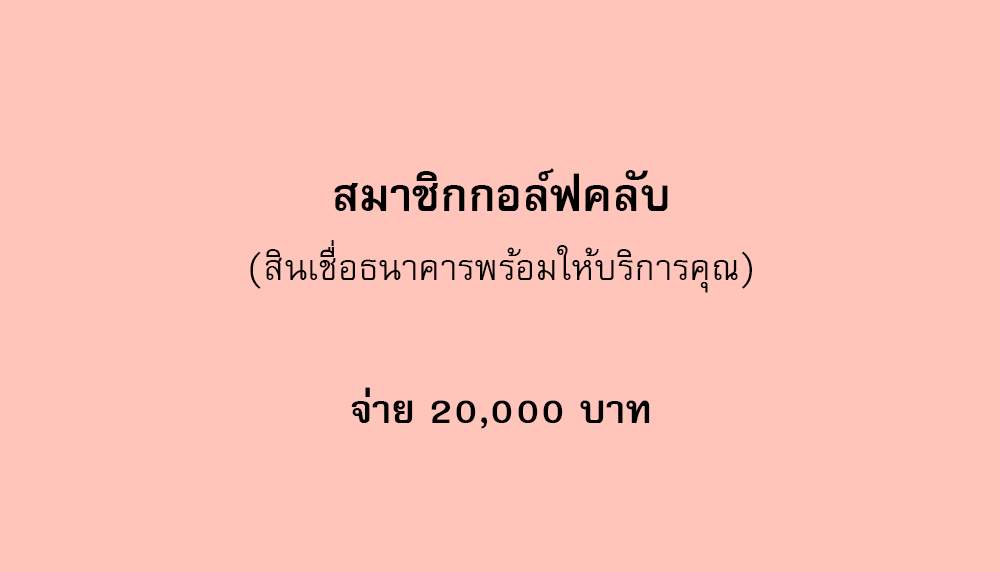
<style>
.page{position:relative;width:1000px;height:572px;background:#ffc4ba}
.page>*{position:absolute;margin:0}
.t1{font:64px "FreesiaUPCBold";color:#000000}
.t2{font:50px "FreesiaUPC";color:#000000}
.t3{font:56px "FreesiaUPCBold";color:#000000}
</style>
<div class="page">
<p class="t1" style="left:334px;top:168px;width:334px;height:43px">สมาชิกกอล์ฟคลับ</p>
<p class="t2" style="left:250px;top:240px;width:502px;height:53px">(สินเชื่อธนาคารพร้อมให้บริการคุณ)</p>
<p class="t3" style="left:351px;top:387px;width:299px;height:42px">จ่าย 20,000 บาท</p>
</div>
